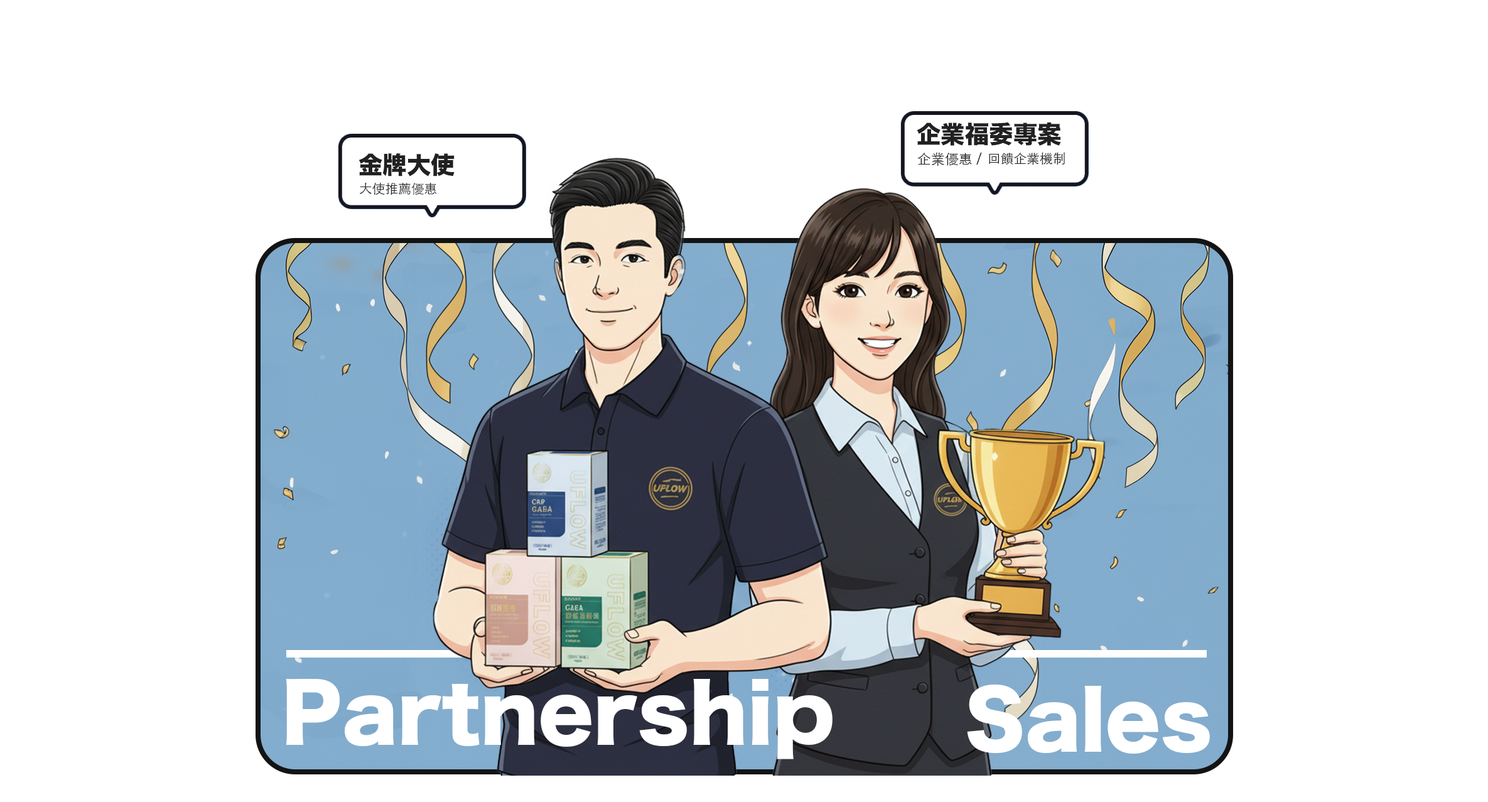
<style>
.page{position:relative;width:1488px;height:802px;background:#ffffff}
.page>*{position:absolute;margin:0}
.t1{font:24.1px "HiraKakuStdN-W8";color:#212121}
.t2{font:13.9px "STHeitiTC-Light";color:#212121}
.t3{font:13px "STHeitiTC-Light";color:#212121}
.t4{font:79.5px "HiraKakuStdN-W8";color:#ffffff}
</style>
<div class="page">
<p class="t1" style="left:916px;top:122px;width:145px;height:24px">企業福委專案</p>
<p class="t1" style="left:358px;top:153px;width:96px;height:23px">金牌大使</p>
<p class="t2" style="left:917px;top:153px;width:65px;height:13px">企業優惠 /</p>
<p class="t3" style="left:989px;top:153px;width:76px;height:12px">回饋企業機制</p>
<p class="t3" style="left:359px;top:183px;width:78px;height:12px">大使推薦優惠</p>
<p class="t4" style="left:286px;top:679px;width:546px;height:80px">Partnership</p>
<p class="t4" style="left:967px;top:684px;width:243px;height:69px">Sales</p>
</div>
